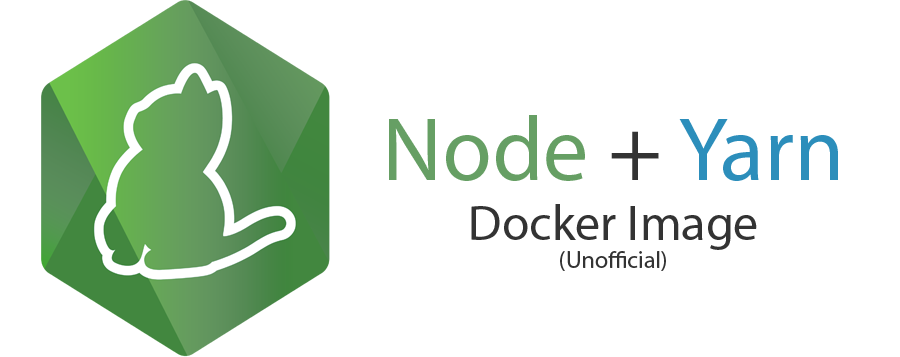
<style>
.page{position:relative;width:900px;height:357px;background:#ffffff}
.page>*{position:absolute;margin:0}
.t1{font:50px "MyriadPro-Regular";color:#333333}
.t2{font:91px "MyriadPro-Regular";color:#669f64}
.t3{font:91px "MyriadPro-Regular";color:#333333}
.t4{font:91px "MyriadPro-Regular";color:#2c8ebb}
.t5{font:24px "MyriadPro-Regular";color:#333333}
</style>
<div class="page">
<p class="t1" style="left:389px;top:115px;width:449px;height:156px;text-align:center"><span class="t2">Node </span><span class="t3">+ </span><span class="t4">Yarn<br></span>Docker Image<br><span class="t5">(Unofficial)</span></p>
</div>
